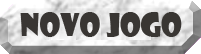
<style>
.page{position:relative;width:201px;height:54px;background:#393633}
.page>*{position:absolute;margin:0}
.t1{font:30px "ShowcardGothic-Reg";color:#393633}
.t2{font:14px "ShowcardGothic-Reg";color:#1a2732}
</style>
<div class="page">
<p class="t1" style="left:20px;top:12px;width:162px;height:25px"><span class="t2"><br></span>novo jogo</p>
</div>
